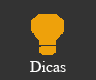
<style>
.page{position:relative;width:96px;height:80px;background:#333333}
.page>*{position:absolute;margin:0}
.t1{font:24px "AngsanaUPC";color:#fcfcfb}
</style>
<div class="page">
<p class="t1" style="left:30px;top:61px;width:36px;height:11px">Dicas</p>
</div>
